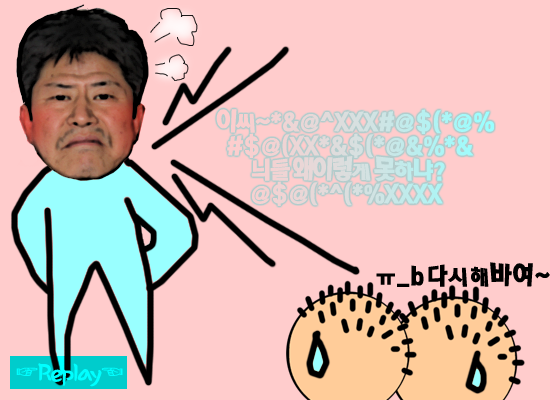
<style>
.page{position:relative;width:550px;height:400px;background:#ffcccc}
.page>*{position:absolute;margin:0}
.t1{font:24px/24px "RixComingsoonB";letter-spacing:-0.05em}
.t2{font:24px "RixComingsoonB";letter-spacing:0.05em;color:#000000}
.t3{font:30px "SachunM";letter-spacing:-0.1em;color:#00ffff}
</style>
<div class="page">
<p class="t1" style="left:216px;top:109px;width:278px;height:97px">이씨~*&amp;@^XXX#@$(*@%<br>  #$@(XX*&amp;$(*@&amp;%*&amp;<br>       늬들 왜이렇게 못하냐?<br>       @$@(*^(*%XXXX</p>
<p class="t2" style="left:376px;top:262px;width:174px;height:25px">ㅠ_b다시해바여~</p>
<p class="t3" style="left:16px;top:363px;width:107px;height:24px">☞Replay☜</p>
</div>
